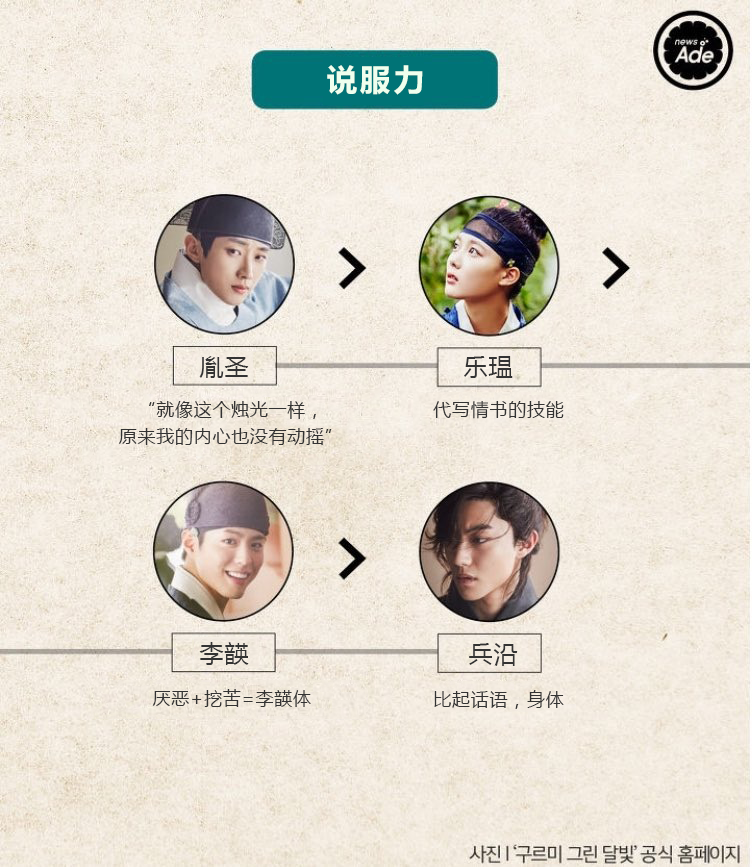
<style>
.page{position:relative;width:752px;height:867px}
.page>*{position:absolute;margin:0}
.t1{font:32px "FZLTCHK--GBK1-0";letter-spacing:0.04em;color:#efffee}
.t2{font:24px "MicrosoftYaHei";letter-spacing:0.04em;color:#333333}
.t3{font:18px/26.7px "MicrosoftYaHei";letter-spacing:0.04em;color:#333333}
.t4{font:18px "MicrosoftYaHei";letter-spacing:0.04em;color:#333333}
</style>
<div class="page">
<p class="t1" style="left:327px;top:65px;width:96px;height:30px">说服力</p>
<p class="t2" style="left:199px;top:356px;width:50px;height:22px">胤圣</p>
<p class="t2" style="left:464px;top:356px;width:49px;height:22px">乐瑥</p>
<p class="t3" style="left:118px;top:401px;width:214px;height:44px;text-align:center">“就像这个烛光一样，<br>原来我的内心也没有动摇”</p>
<p class="t4" style="left:433px;top:401px;width:131px;height:18px">代写情书的技能</p>
<p class="t2" style="left:199px;top:642px;width:50px;height:23px">李韺</p>
<p class="t2" style="left:469px;top:643px;width:49px;height:23px">兵沿</p>
<p class="t4" style="left:152px;top:689px;width:159px;height:18px">厌恶+挖苦=李韺体</p>
<p class="t4" style="left:434px;top:690px;width:130px;height:19px">比起话语，身体</p>
</div>
